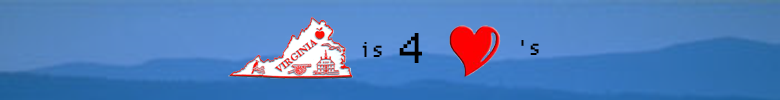
<style>
.page{position:relative;width:780px;height:100px}
.page>*{position:absolute;margin:0}
.t1{font:60px "ProggySquareTTSZ";color:#000000}
.t2{font:30px "ProggySquareTTSZ";color:#000000}
</style>
<div class="page">
<p class="t1" style="left:399px;top:33px;width:23px;height:30px">4</p>
<p class="t2" style="left:521px;top:40px;width:18px;height:15px">'s</p>
<p class="t2" style="left:362px;top:42px;width:20px;height:15px">is</p>
</div>
